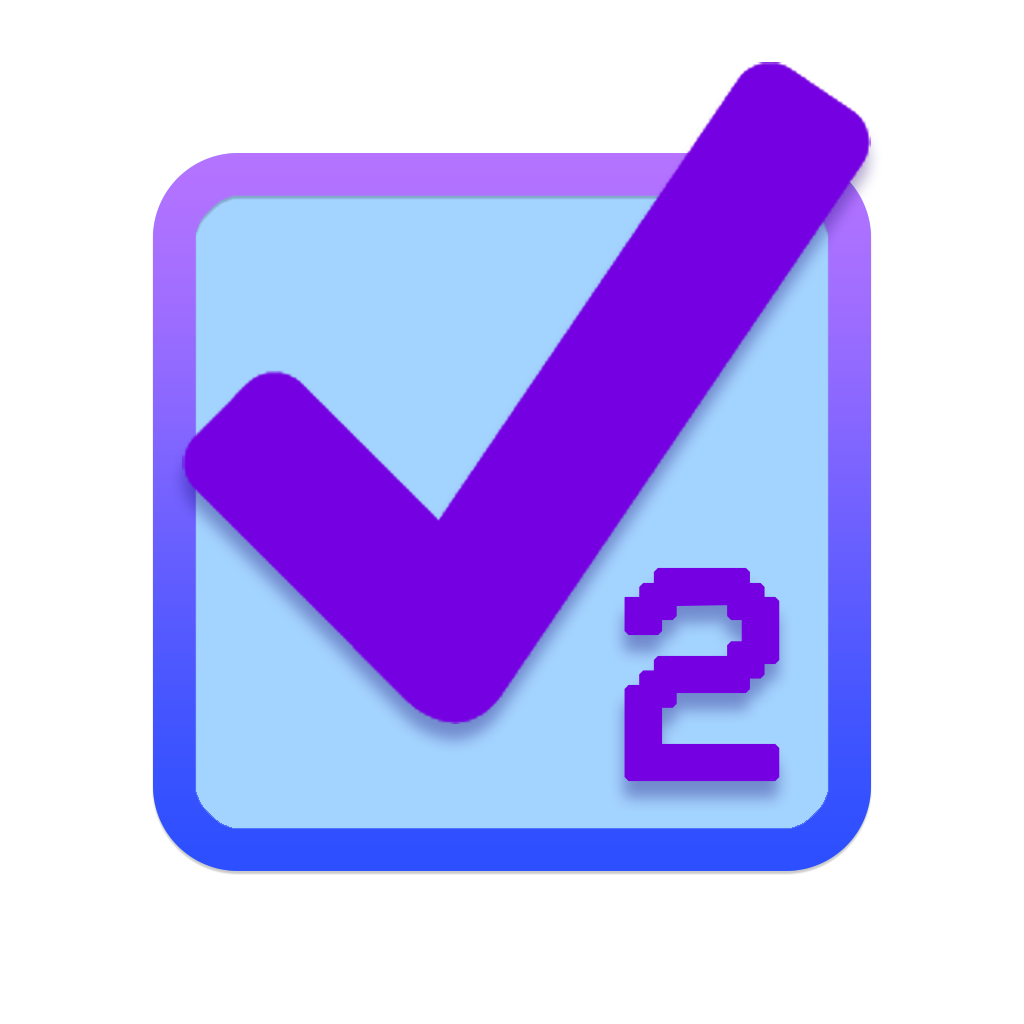
<style>
.page{position:relative;width:1024px;height:1024px;background:#ffffff}
.page>*{position:absolute;margin:0}
.t1{font:300px "VCROSDMono";color:#7500e2;font-weight:bold}
</style>
<div class="page">
<p class="t1" style="left:624px;top:567px;width:156px;height:215px">2</p>
</div>
